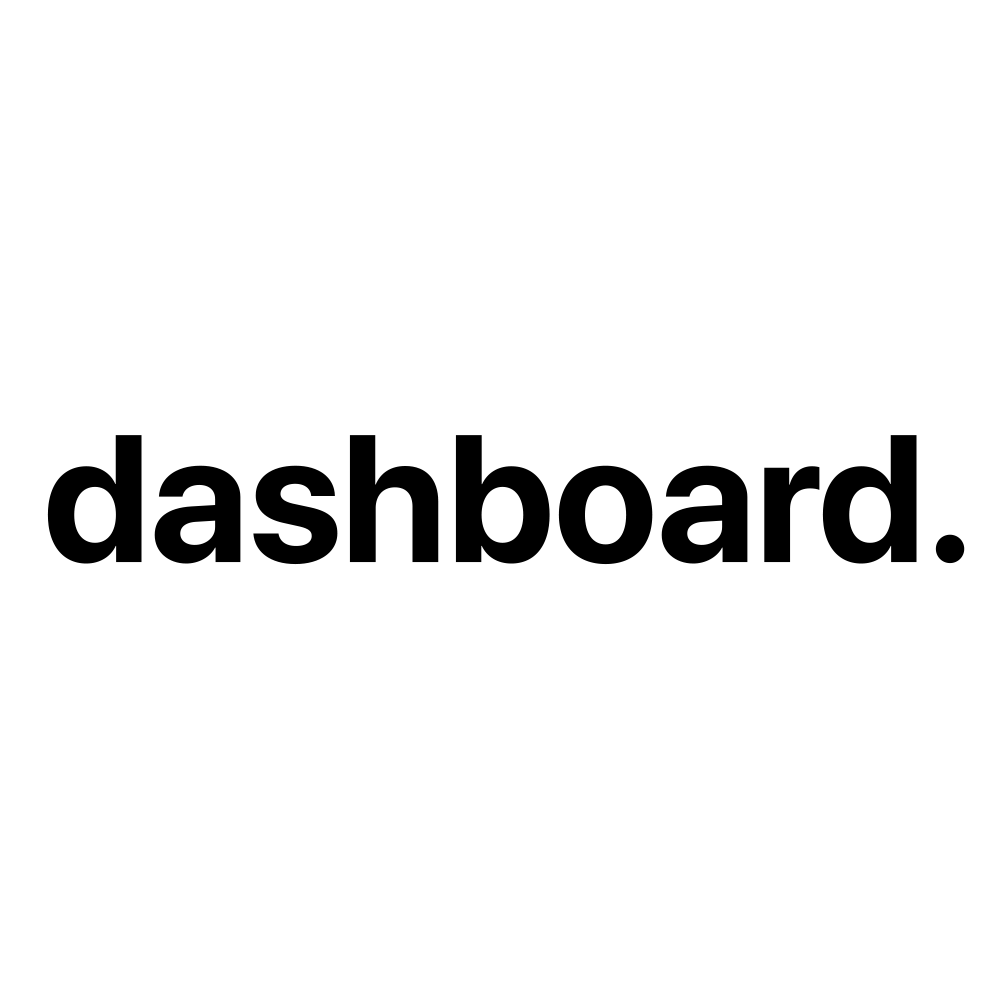
<style>
.page{position:relative;width:1000px;height:1000px;background:#ffffff}
.page>*{position:absolute;margin:0}
.t1{font:180px "SFProDisplay-Bold";color:#000000}
</style>
<div class="page">
<p class="t1" style="left:47px;top:435px;width:918px;height:130px">dashboard.</p>
</div>
